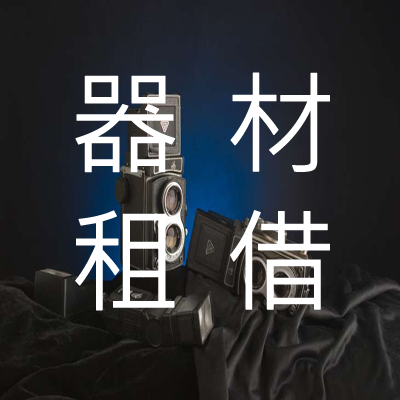
<style>
.page{position:relative;width:400px;height:400px}
.page>*{position:absolute;margin:0}
.t1{font:112.2px/68.8px "MicrosoftJhengHeiRegular";letter-spacing:0.04em;color:#ffffff;font-weight:bold}
</style>
<div class="page">
<p class="t1" style="left:75px;top:72px;width:255px;height:239px;text-align:center">器 材<br><br>租 借</p>
</div>
